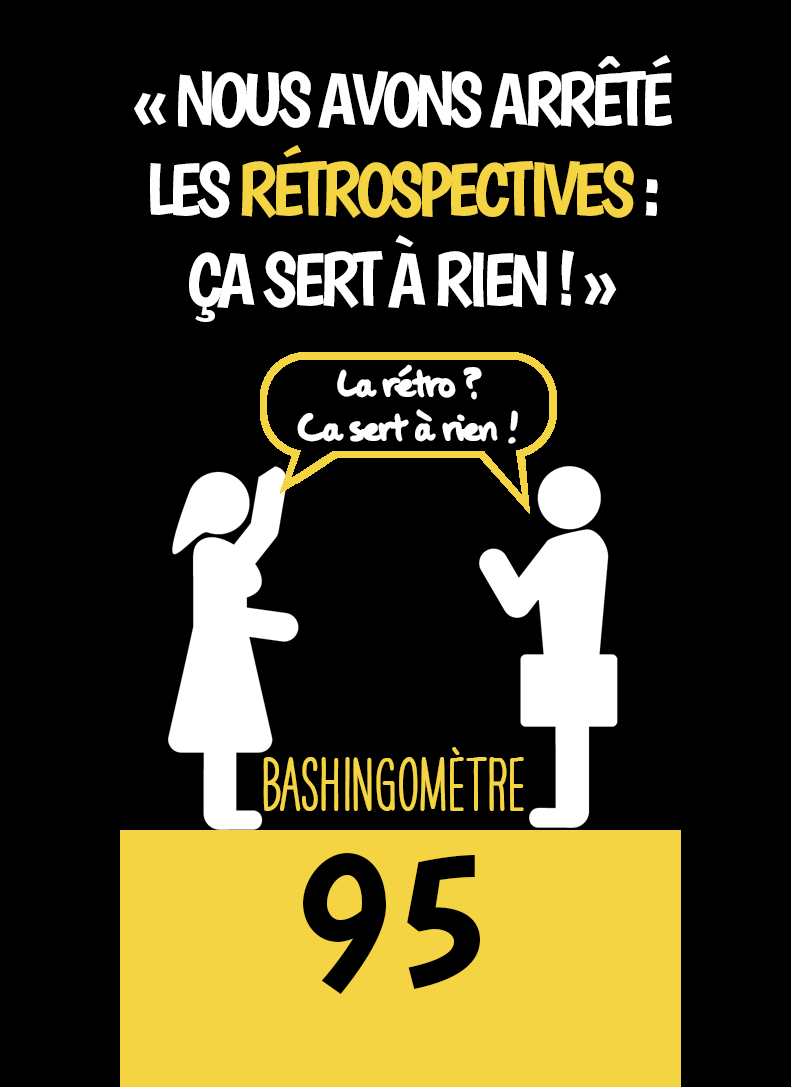
<style>
.page{position:relative;width:791px;height:1087px;background:#000000}
.page>*{position:absolute;margin:0}
.t1{font:75px "Boogaloo-Regular";letter-spacing:-0.08em;color:#ffffff}
.t2{font:75px "Boogaloo-Regular";letter-spacing:-0.08em;color:#f4d443}
.t3{font:45.8px/44.2px "OakStreetW01-Regular";letter-spacing:-0.08em;color:#ffffff}
.t4{font:66.7px "HAVEANICEDAYTallW04-Bold";color:#f4d443}
.t5{font:200px "Boogaloo-Regular";color:#000000}
</style>
<div class="page">
<p class="t1" style="left:134px;top:55px;width:538px;height:267px;text-align:center">« NOUS AVONS ARRÊTÉ LES <span class="t2">RÉTROSPECTIVES</span> : <br>ÇA SERT À RIEN ! »</p>
<p class="t3" style="left:297px;top:364px;width:221px;height:80px;text-align:center">La rétro ?<br>Ca sert à rien !</p>
<p class="t4" style="left:263px;top:747px;width:261px;height:64px">BASHINgomètre</p>
<p class="t5" style="left:303px;top:853px;width:177px;height:141px">95</p>
</div>
